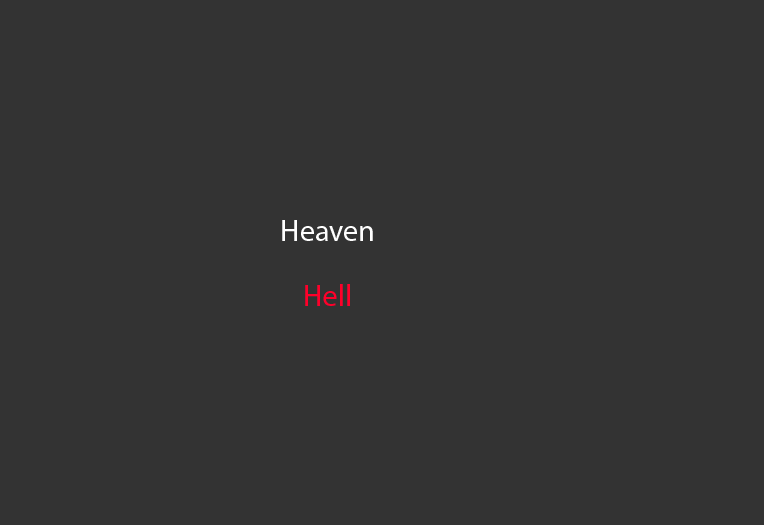
<style>
.page{position:relative;width:764px;height:525px;background:#333333}
.page>*{position:absolute;margin:0}
.t1{font:30px "MyriadPro-Regular";color:#ffffff}
.t2{font:30px "MyriadPro-Regular";color:#ff002a}
</style>
<div class="page">
<p class="t1" style="left:282px;top:220px;width:91px;height:21px">Heaven</p>
<p class="t2" style="left:305px;top:284px;width:45px;height:22px">Hell</p>
</div>
